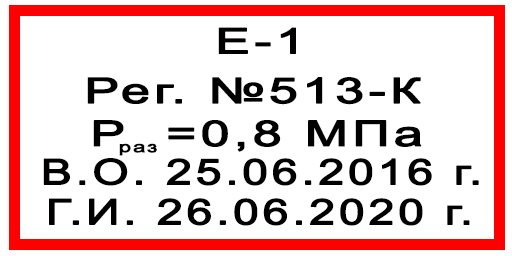
<style>
.page{position:relative;width:512px;height:256px;background:#ffffff}
.page>*{position:absolute;margin:0}
.t1{font:60.7px "ArialMT";letter-spacing:0.06em;color:#000000;font-weight:bold;scale:1.46 1}
.t2{font:26.2px "ArialMT";letter-spacing:0.06em;color:#000000;font-weight:bold;scale:1.45 1}
.t3{font:60.9px "ArialMT";letter-spacing:0.06em;color:#000000;font-weight:bold;scale:1.3 1}
</style>
<div class="page">
<p class="t1" style="left:218px;top:27px;width:78px;height:27px">E-1</p>
<p class="t1" style="left:87px;top:77px;width:334px;height:28px">Рег. №513-К</p>
<p class="t1" style="left:93px;top:120px;width:329px;height:32px">P  =0,8 МПа</p>
<p class="t2" style="left:119px;top:143px;width:38px;height:13px">раз</p>
<p class="t3" style="left:43px;top:158px;width:436px;height:28px">В.О. 25.06.2016 г.</p>
<p class="t3" style="left:49px;top:198px;width:421px;height:28px">Г.И. 26.06.2020 г.</p>
</div>
